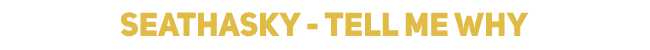
<style>
.page{position:relative;width:650px;height:50px;background:#ffffff}
.page>*{position:absolute;margin:0}
.t1{font:33px "UniSansHeavyCAPS";color:#e0bb46}
</style>
<div class="page">
<p class="t1" style="left:120px;top:12px;width:409px;height:25px">Seathasky - Tell Me why</p>
</div>
